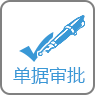
<style>
.page{position:relative;width:95px;height:95px;background:#ffffff}
.page>*{position:absolute;margin:0}
.t1{font:18px "MicrosoftYaHei";color:#3998d6}
</style>
<div class="page">
<p class="t1" style="left:13px;top:67px;width:72px;height:17px">单据审批</p>
</div>
